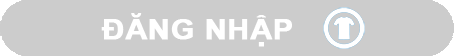
<style>
.page{position:relative;width:454px;height:56px;background:#cccccc}
.page>*{position:absolute;margin:0}
.t1{font:27.9px "Arial-BoldMT";letter-spacing:0.01em;color:#ffffff;font-weight:bold;scale:1.08 1}
</style>
<div class="page">
<p class="t1" style="left:101px;top:13px;width:191px;height:34px">ĐĂNG NHẬP</p>
</div>
